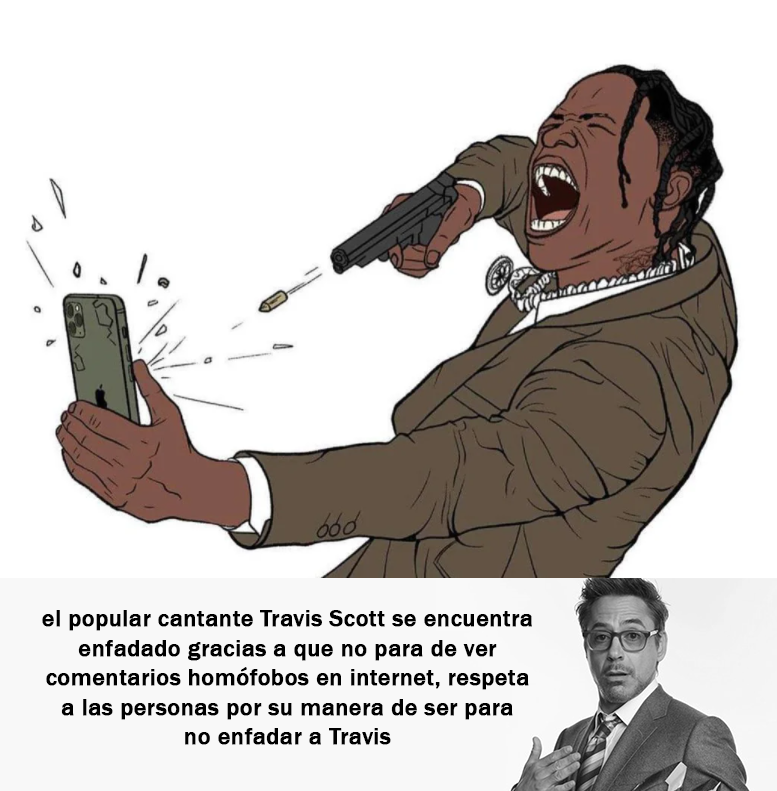
<style>
.page{position:relative;width:777px;height:791px;background:#ffffff}
.page>*{position:absolute;margin:0}
.t1{font:24px "FranklinGothic-Medium";color:#000000;font-weight:bold}
</style>
<div class="page">
<p class="t1" style="left:42px;top:610px;width:490px;height:135px;text-align:center">el popular cantante Travis Scott se encuentra<br>enfadado gracias a que no para de ver<br>comentarios homófobos en internet, respeta<br>a las personas por su manera de ser para<br>no enfadar a Travis</p>
</div>
